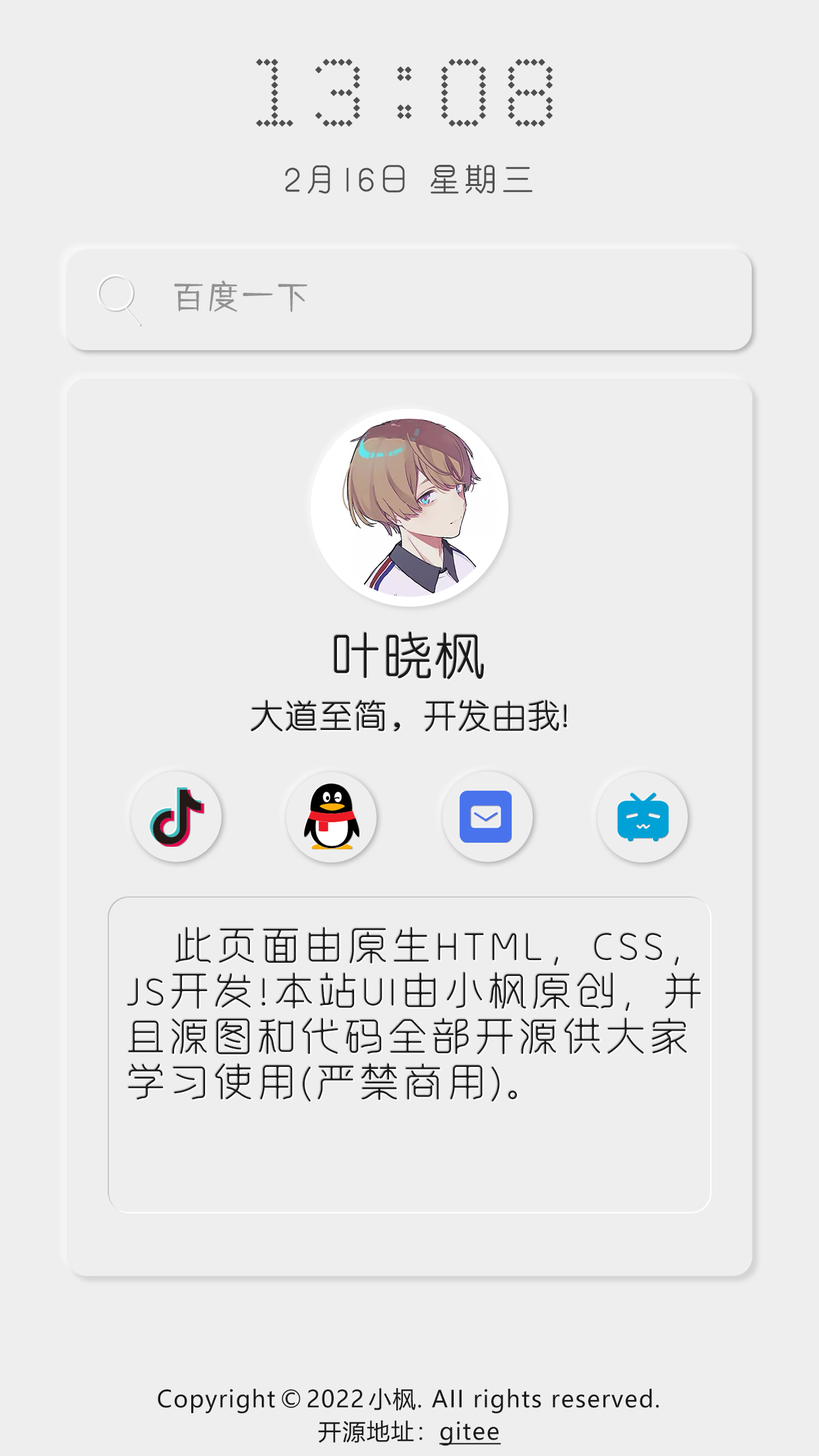
<style>
.page{position:relative;width:819px;height:1456px;background:#eeeeee}
.page>*{position:absolute;margin:0}
.t1{font:98.9px "DottedSongtiDiamondRegular";letter-spacing:0.11em;color:#4f4f4f;font-weight:bold}
.t2{font:33px "ZXFTingShanTrial";letter-spacing:0.11em;color:#4f4f4f}
.t3{font:33px "TsangerShuYuanT-W02";letter-spacing:0.05em;color:#929292}
.t4{font:49.5px "HGJY2";letter-spacing:0.05em;color:#1a1a1a}
.t5{font:33px "HGJY2";letter-spacing:0.05em;color:#1a1a1a}
.t6{font:39.6px/45.5px "ZXF-Jiangnan-Light";letter-spacing:0.1em;color:#1a1a1a}
.t7{font:23.2px "MicrosoftYaHei";letter-spacing:0.05em;color:#1a1a1a}
.t8{font:23.1px "MicrosoftYaHei";letter-spacing:0.05em;color:#1a1a1a}
.t9{font:23.1px "MicrosoftYaHei";letter-spacing:0.05em;color:#1a1a1a;text-decoration:underline}
</style>
<div class="page">
<p class="t1" style="left:256px;top:59px;width:297px;height:68px">13:08</p>
<p class="t2" style="left:285px;top:164px;width:248px;height:30px">2月16日 星期三</p>
<p class="t3" style="left:174px;top:280px;width:133px;height:32px">百度一下</p>
<p class="t4" style="left:334px;top:632px;width:150px;height:47px">叶晓枫</p>
<p class="t5" style="left:251px;top:700px;width:316px;height:32px">大道至简，开发由我!</p>
<p class="t6" style="left:127px;top:927px;width:574px;height:175px">此页面由原生HTML，CSS，JS开发!本站UI由小枫原创，并且源图和代码全部开源供大家学习使用(严禁商用)。</p>
<p class="t7" style="left:158px;top:1388px;width:501px;height:26px">Copyright©2022小枫. AII rights reserved.</p>
<p class="t8" style="left:318px;top:1420px;width:183px;height:26px">开源地址：<span class="t9">gitee</span></p>
</div>
